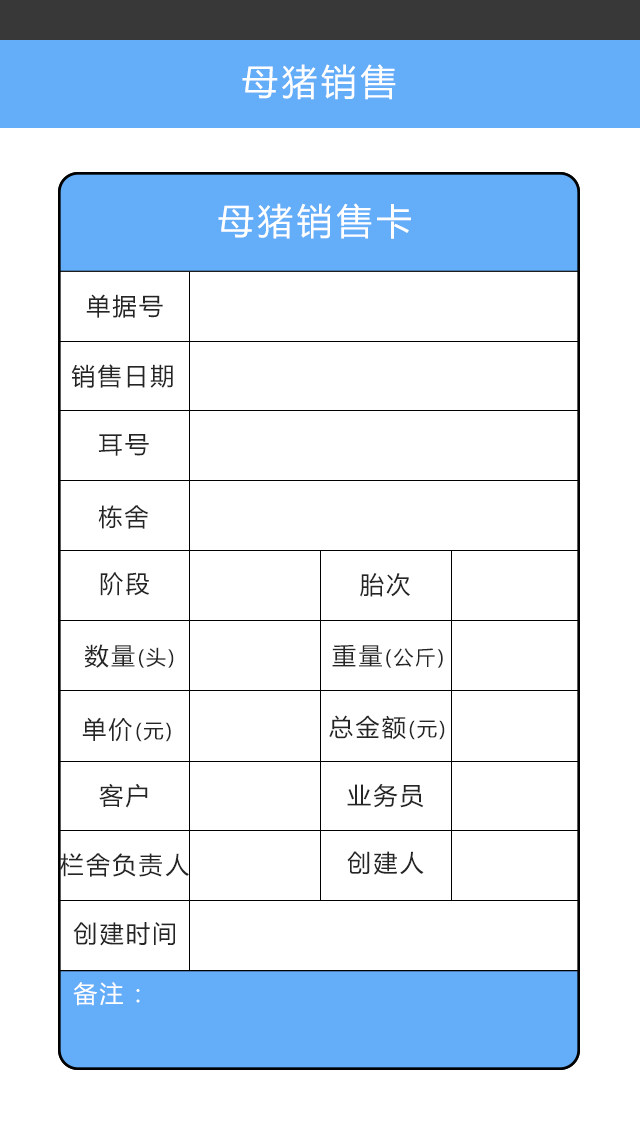
<style>
.page{position:relative;width:640px;height:1136px;background:#ffffff}
.page>*{position:absolute;margin:0}
.t1{font:36px "MicrosoftYaHei";letter-spacing:0.1em;color:#ffffff}
.t2{font:24px "MicrosoftYaHei";letter-spacing:0.1em;color:#252525}
.t3{font:20px "MicrosoftYaHei";letter-spacing:0.1em;color:#252525}
.t4{font:24px "MicrosoftYaHei";letter-spacing:0.1em;color:#ffffff}
</style>
<div class="page">
<p class="t1" style="left:242px;top:64px;width:154px;height:36px">母猪销售</p>
<p class="t1" style="left:218px;top:203px;width:193px;height:36px">母猪销售卡</p>
<p class="t2" style="left:86px;top:294px;width:77px;height:24px">单据号</p>
<p class="t2" style="left:71px;top:364px;width:102px;height:24px">销售日期</p>
<p class="t2" style="left:98px;top:434px;width:51px;height:22px">耳号</p>
<p class="t2" style="left:98px;top:505px;width:51px;height:24px">栋舍</p>
<p class="t2" style="left:100px;top:572px;width:50px;height:24px">阶段</p>
<p class="t2" style="left:360px;top:573px;width:50px;height:24px">胎次</p>
<p class="t3" style="left:84px;top:644px;width:90px;height:24px"><span class="t2">数量</span>(头)</p>
<p class="t3" style="left:332px;top:644px;width:111px;height:24px"><span class="t2">重量</span>(公斤)</p>
<p class="t3" style="left:82px;top:717px;width:89px;height:25px"><span class="t2">单价</span>(元)</p>
<p class="t2" style="left:329px;top:715px;width:116px;height:25px">总金额<span class="t3">(元)</span></p>
<p class="t2" style="left:99px;top:783px;width:49px;height:25px">客户</p>
<p class="t2" style="left:347px;top:783px;width:77px;height:25px">业务员</p>
<p class="t2" style="left:60px;top:853px;width:129px;height:24px">栏舍负责人</p>
<p class="t2" style="left:347px;top:851px;width:77px;height:24px">创建人</p>
<p class="t2" style="left:73px;top:922px;width:102px;height:24px">创建时间</p>
<p class="t4" style="left:73px;top:982px;width:67px;height:24px">备注：</p>
</div>
